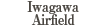
<style>
.page{position:relative;width:106px;height:27px;background:#ffffff}
.page>*{position:absolute;margin:0}
.t1{font:14px/13px "RyuminPro-ExBold";letter-spacing:-0.04em;color:#4c4843;scale:0.9 1}
</style>
<div class="page">
<p class="t1" style="left:27px;top:1px;width:52px;height:24px;text-align:center">Iwagawa<br>Airfield</p>
</div>
